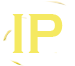
<style>
.page{position:relative;width:75px;height:66px;background:#ffffff}
.page>*{position:absolute;margin:0}
.t1{font:58.1px "CopperplateGothic-Bold";color:#f5e961;scale:0.83 1}
</style>
<div class="page">
<p class="t1" style="left:12px;top:14px;width:51px;height:39px">IP</p>
</div>
